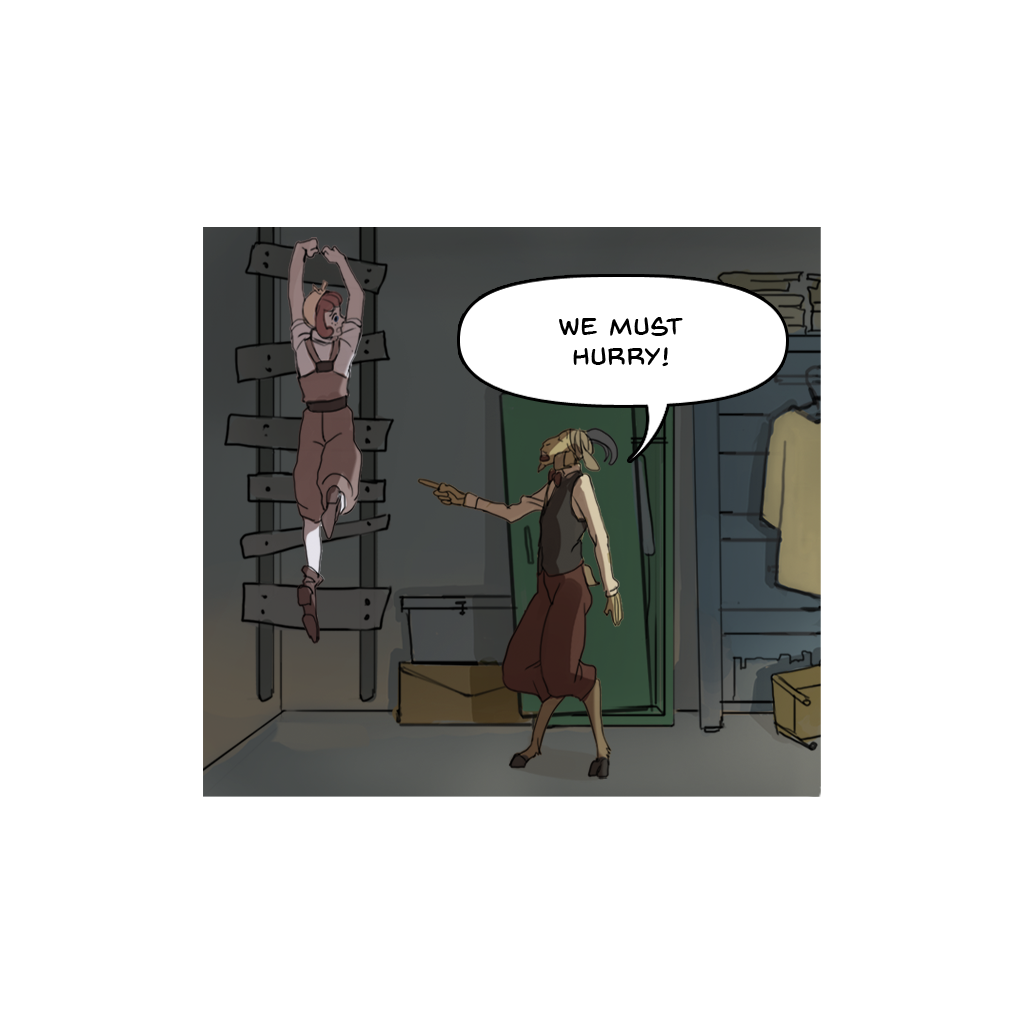
<style>
.page{position:relative;width:1024px;height:1024px;background:#ffffff}
.page>*{position:absolute;margin:0}
.t1{font:25px "BackIssuesBB";letter-spacing:0.05em;color:#000000}
</style>
<div class="page">
<p class="t1" style="left:559px;top:317px;width:124px;height:50px;text-align:center">We must hurry!</p>
</div>
